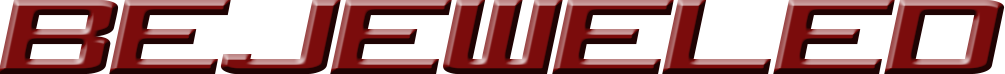
<style>
.page{position:relative;width:1005px;height:74px;background:#ffffff}
.page>*{position:absolute;margin:0}
.t1{font:148px "NeverSayDie"}
</style>
<div class="page">
<p class="t1" style="left:0px;top:0px;width:1005px;height:74px">bejeweled</p>
</div>
